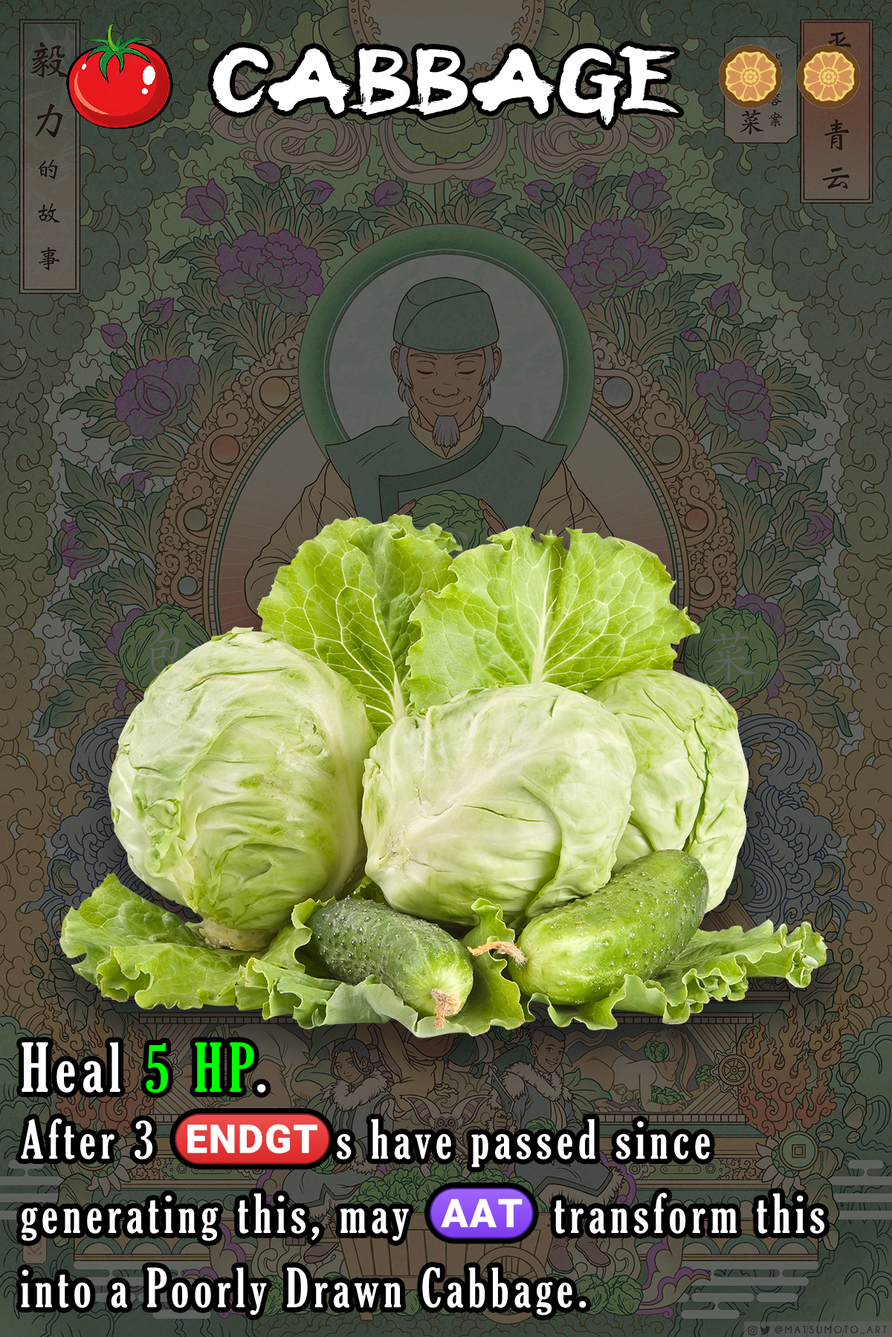
<style>
.page{position:relative;width:892px;height:1337px}
.page>*{position:absolute;margin:0}
.t1{font:173.9px "AvatarAirbender";color:#ffffff}
.t2{font:89.2px/74.3px "GloucesterMT-ExtraCondensed";letter-spacing:0.1em;color:#ffffff}
.t3{font:111.5px/74.3px "GloucesterMT-ExtraCondensed";letter-spacing:0.1em;color:#ffffff}
.t4{font:111.5px/74.3px "GloucesterMT-ExtraCondensed";letter-spacing:0.1em;color:#00ff00}
.t5{font:89.2px/74.3px "stoogedings-Regular";letter-spacing:0.1em;color:#ffffff}
</style>
<div class="page">
<p class="t1" style="left:212px;top:45px;width:467px;height:81px">CABBAGE</p>
<p class="t2" style="left:21px;top:1042px;width:803px;height:274px"><span class="t3">Heal </span><span class="t4">5 HP</span><span class="t3">.<br></span>After 3 <span class="t5">(ENDGT)</span>s have passed since generating this, may <span class="t5">(AAT)</span> transform this into a Poorly Drawn Cabbage.</p>
</div>
